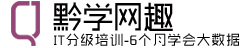
<style>
.page{position:relative;width:252px;height:48px;background:#ffffff}
.page>*{position:absolute;margin:0}
.t1{font:31.9px "MFShangHei_Noncommercial-Regular";letter-spacing:-0.05em;color:#030000;text-transform:uppercase}
.t2{font:14px "MFShangHei_Noncommercial-Regular";letter-spacing:0.05em;color:#030000;text-transform:uppercase}
</style>
<div class="page">
<p class="t1" style="left:53px;top:2px;width:120px;height:29px">黔学网趣</p>
<p class="t2" style="left:54px;top:33px;width:186px;height:13px">IT分级培训-6个月学会大数据</p>
</div>
